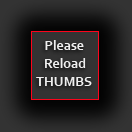
<style>
.page{position:relative;width:132px;height:132px}
.page>*{position:absolute;margin:0}
.t1{font:14px "Corbel-Bold";color:#efefef}
</style>
<div class="page">
<p class="t1" style="left:45px;top:40px;width:39px;height:10px">Please</p>
<p class="t1" style="left:45px;top:58px;width:41px;height:10px">Reload</p>
<p class="t1" style="left:36px;top:77px;width:56px;height:9px">THUMBS</p>
</div>
